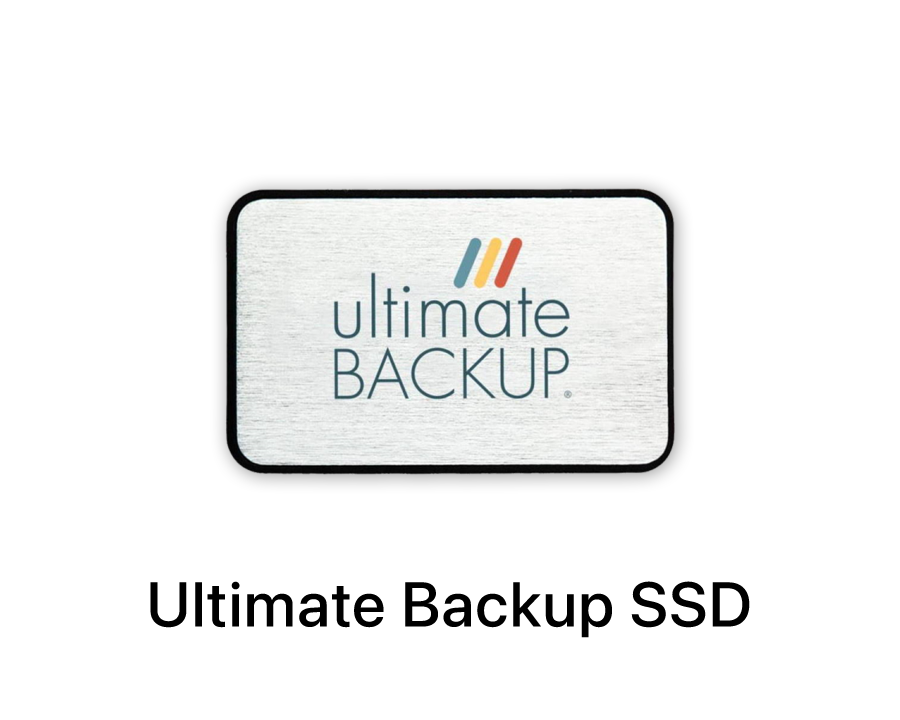
<style>
.page{position:relative;width:900px;height:720px;background:#ffffff}
.page>*{position:absolute;margin:0}
.t1{font:62.7px "SFPro-Medium";letter-spacing:0.025em;color:#000000}
</style>
<div class="page">
<p class="t1" style="left:150px;top:581px;width:600px;height:57px">Ultimate Backup SSD</p>
</div>
